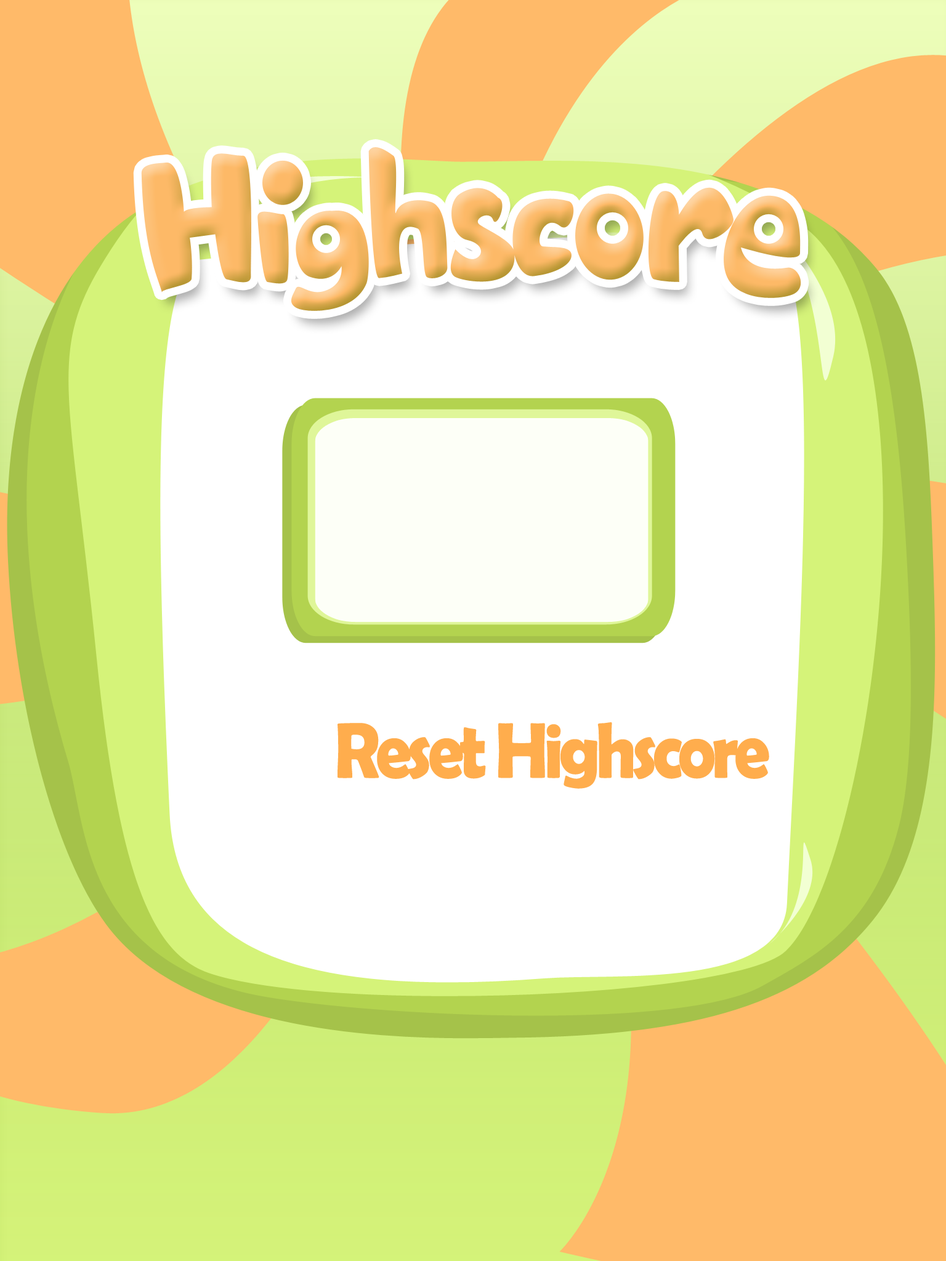
<style>
.page{position:relative;width:946px;height:1261px;background:#ffffff}
.page>*{position:absolute;margin:0}
.t1{font:79.5px "BerlinSansFBDemi-Bold";letter-spacing:-0.06em;color:#ffad4d;scale:0.89 1}
</style>
<div class="page">
<p class="t1" style="left:337px;top:722px;width:432px;height:67px">Reset Highscore</p>
</div>
